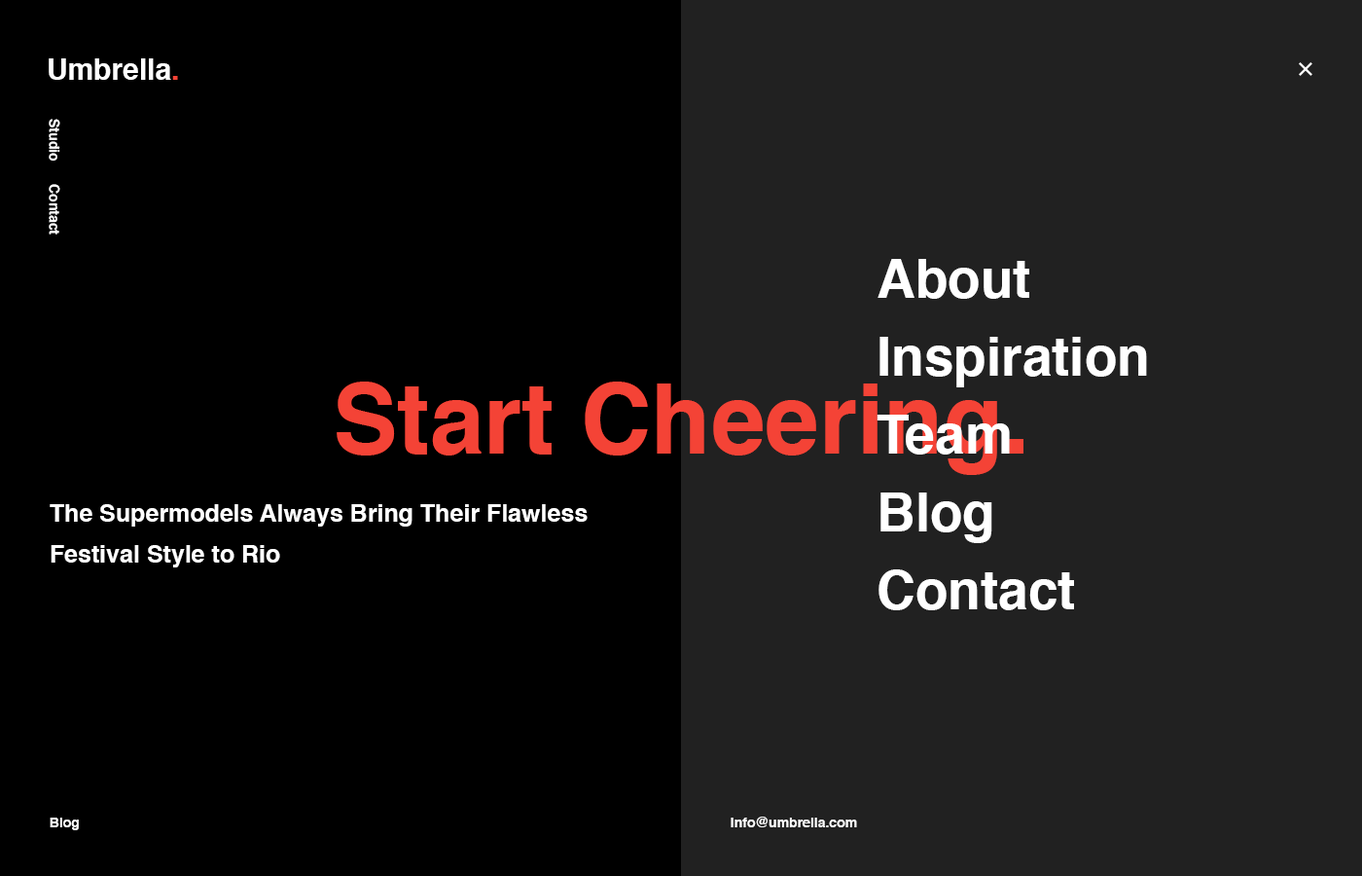
<style>
.page{position:relative;width:1362px;height:876px;background:#000000}
.page>*{position:absolute;margin:0}
.t1{font:29.2px "Helvetica-Bold";color:#ffffff}
.t2{font:29.2px "Helvetica-Bold";color:#f44336}
.t3{font:13.6px "Helvetica-Bold";color:#ffffff}
.t4{font:53.5px/77.8px "Helvetica-Bold";color:#ffffff}
.t5{font:97.3px "Helvetica-Bold";color:#f44336}
.t6{font:24.3px/40.9px "Helvetica-Bold";color:#ffffff}
</style>
<div class="page">
<p class="t1" style="left:49px;top:58px;width:129px;height:22px">Umbrella<span class="t2">.</span></p>
<p class="t3" style="left:49px;top:119px;width:11px;height:115px;rotate:90deg">Studio      Contact</p>
<p class="t4" style="left:877px;top:259px;width:270px;height:351px">About<br>Inspiration<br>Team<br>Blog<br>Contact</p>
<p class="t5" style="left:337px;top:381px;width:686px;height:94px">Start Cheering.</p>
<p class="t6" style="left:50px;top:504px;width:538px;height:63px">The Supermodels Always Bring Their Flawless Festival Style to Rio</p>
<p class="t3" style="left:50px;top:817px;width:29px;height:13px">Blog</p>
<p class="t3" style="left:731px;top:816px;width:126px;height:11px">info@umbrella.com</p>
</div>
